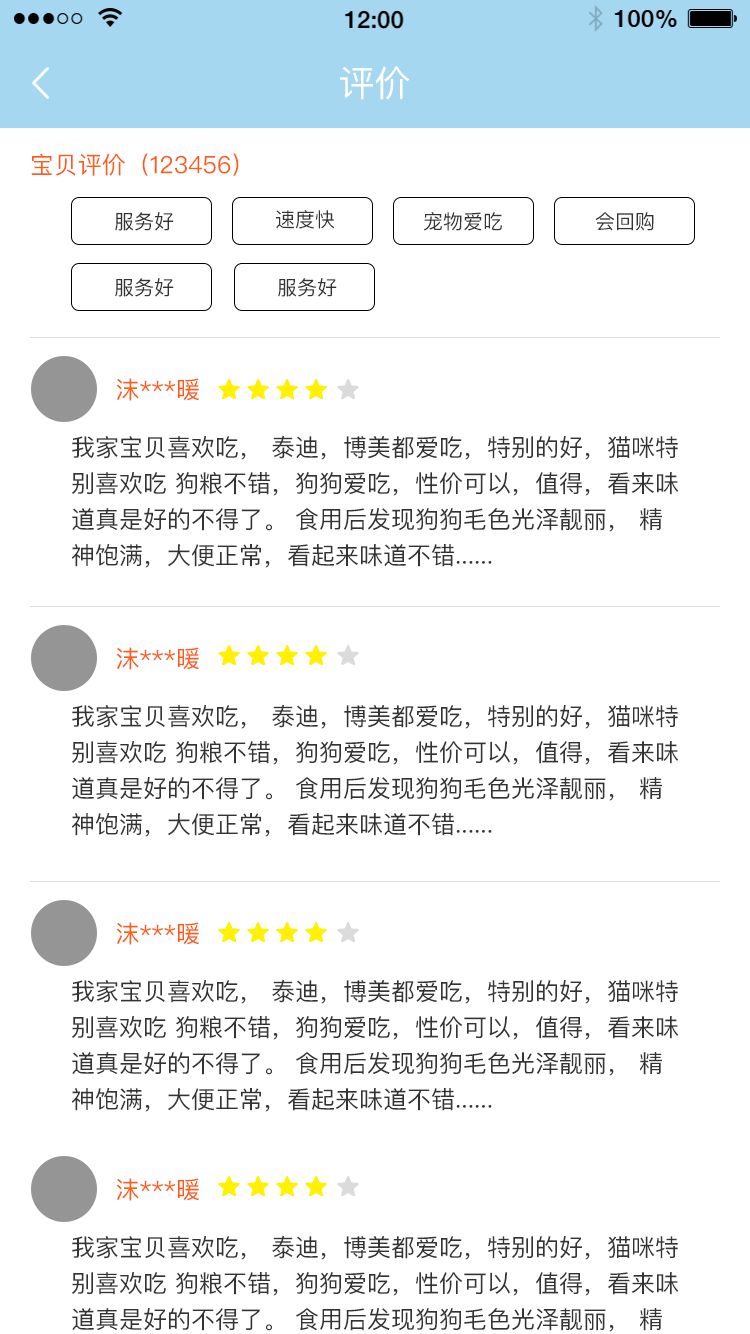
<style>
.page{position:relative;width:750px;height:1334px;background:#ffffff}
.page>*{position:absolute;margin:0}
.t1{font:36px "PingFangSC-Regular";color:#ffffff}
.t2{font:24px "PingFangSC-Regular";color:#ff5c1c}
.t3{font:20px "PingFangSC-Regular";color:#333333}
.t4{font:24px/36px "PingFangSC-Regular";color:#333333}
</style>
<div class="page">
<p class="t1" style="left:340px;top:66px;width:70px;height:34px">评价</p>
<p class="t2" style="left:31px;top:153px;width:208px;height:23px">宝贝评价（123456）</p>
<p class="t3" style="left:115px;top:212px;width:59px;height:19px">服务好</p>
<p class="t3" style="left:276px;top:210px;width:59px;height:19px">速度快</p>
<p class="t3" style="left:424px;top:212px;width:78px;height:19px">宠物爱吃</p>
<p class="t3" style="left:595px;top:212px;width:59px;height:19px">会回购</p>
<p class="t3" style="left:115px;top:278px;width:59px;height:19px">服务好</p>
<p class="t3" style="left:278px;top:278px;width:59px;height:19px">服务好</p>
<p class="t2" style="left:116px;top:378px;width:83px;height:23px">沫***暖</p>
<p class="t4" style="left:72px;top:435px;width:607px;height:133px">我家宝贝喜欢吃， 泰迪，博美都爱吃，特别的好，猫咪特别喜欢吃 狗粮不错，狗狗爱吃，性价可以，值得，看来味道真是好的不得了。 食用后发现狗狗毛色光泽靓丽， 精神饱满，大便正常，看起来味道不错......</p>
<p class="t2" style="left:116px;top:647px;width:83px;height:23px">沫***暖</p>
<p class="t4" style="left:72px;top:704px;width:607px;height:133px">我家宝贝喜欢吃， 泰迪，博美都爱吃，特别的好，猫咪特别喜欢吃 狗粮不错，狗狗爱吃，性价可以，值得，看来味道真是好的不得了。 食用后发现狗狗毛色光泽靓丽， 精神饱满，大便正常，看起来味道不错......</p>
<p class="t2" style="left:116px;top:922px;width:83px;height:23px">沫***暖</p>
<p class="t4" style="left:72px;top:979px;width:607px;height:133px">我家宝贝喜欢吃， 泰迪，博美都爱吃，特别的好，猫咪特别喜欢吃 狗粮不错，狗狗爱吃，性价可以，值得，看来味道真是好的不得了。 食用后发现狗狗毛色光泽靓丽， 精神饱满，大便正常，看起来味道不错......</p>
<p class="t2" style="left:116px;top:1178px;width:83px;height:23px">沫***暖</p>
</div>
